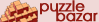
<style>
.page{position:relative;width:99px;height:22px;background:#f0d9d7}
.page>*{position:absolute;margin:0}
.t1{font:14.7px "AvantGarde-Book-Bold";color:#921b12;scale:0.96 1}
</style>
<div class="page">
<p class="t1" style="left:40px;top:0px;width:45px;height:15px">puzzle</p>
<p class="t1" style="left:56px;top:10px;width:42px;height:12px">bazar</p>
</div>
